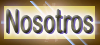
<style>
.page{position:relative;width:100px;height:45px}
.page>*{position:absolute;margin:0}
.t1{font:34px "ArialRoundedMTBold";scale:0.59 1}
</style>
<div class="page">
<p class="t1" style="left:6px;top:9px;width:87px;height:24px">Nosotros</p>
<p class="t1" style="left:7px;top:10px;width:87px;height:24px">Nosotros</p>
</div>
